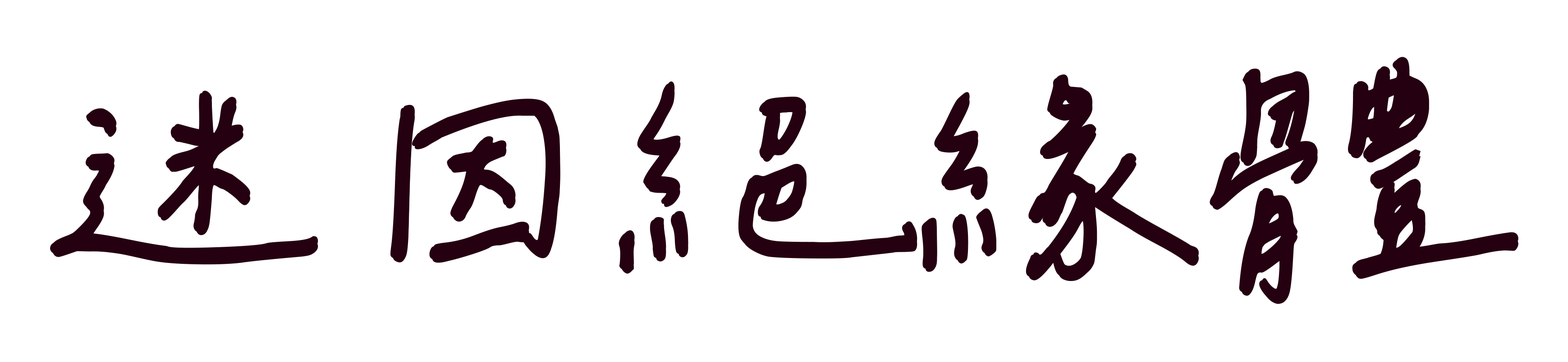
<style>
.page{position:relative;width:1568px;height:362px;background:#ffffff}
.page>*{position:absolute;margin:0}
.t1{font:298.7px "ChenYuluoyan-Thin-Monospaced";color:#250011;text-transform:uppercase}
</style>
<div class="page">
<p class="t1" style="left:50px;top:59px;width:1466px;height:242px">迷因絕緣體</p>
<p class="t1" style="left:53px;top:62px;width:1465px;height:242px">迷因絕緣體</p>
<p class="t1" style="left:53px;top:57px;width:1465px;height:242px">迷因絕緣體</p>
</div>
